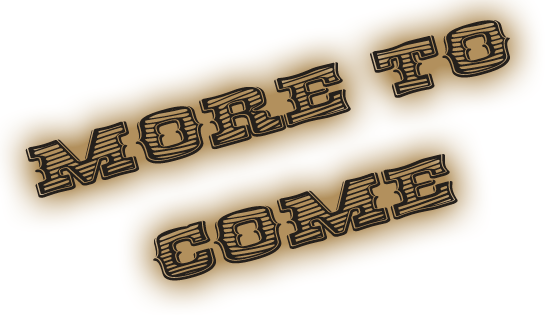
<style>
.page{position:relative;width:560px;height:315px;background:#ffffff}
.page>*{position:absolute;margin:0}
.t1{font:74px/117.1px "RioGrandeStriped-Bold";color:#24201c;scale:1.66 1}
</style>
<div class="page">
<p class="t1" style="left:25px;top:20px;width:485px;height:261px;text-align:center;rotate:-16deg">More To<br>Come</p>
</div>
